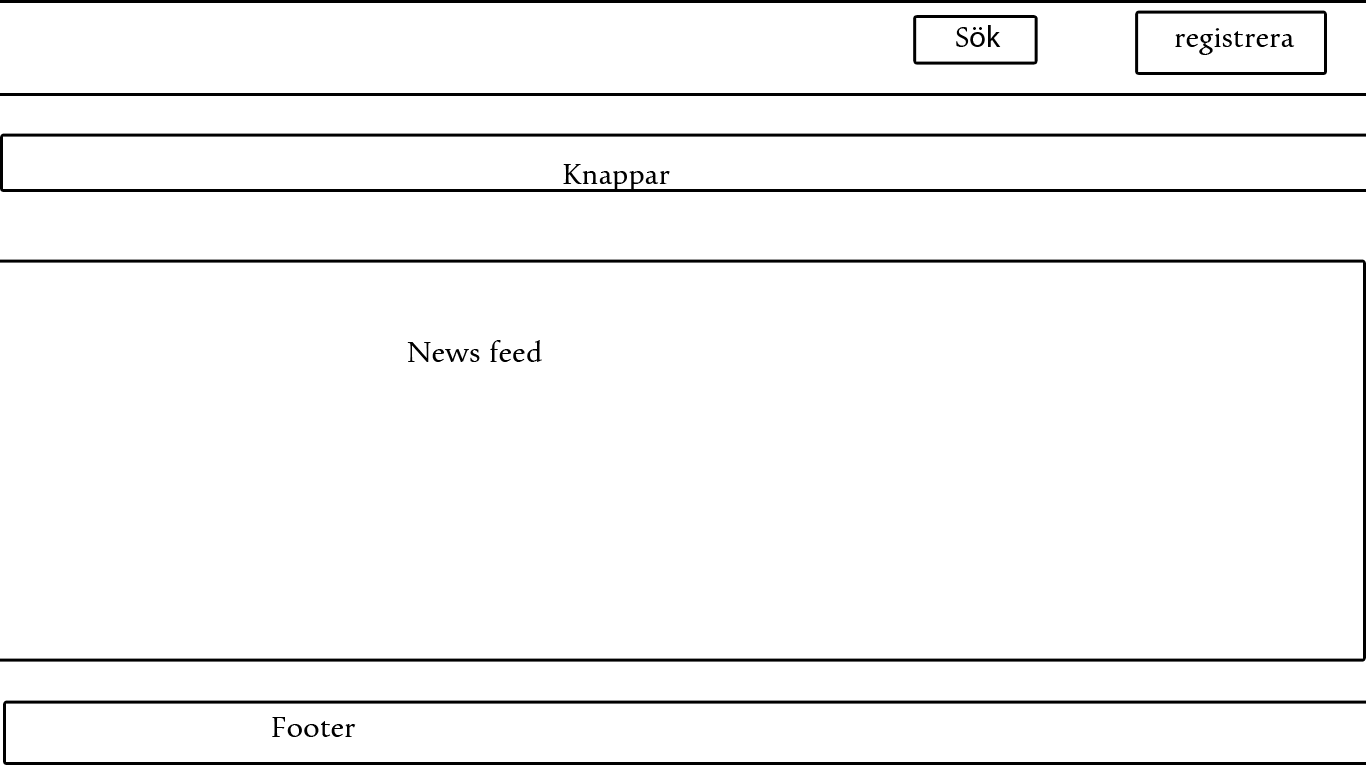
<style>
.page{position:relative;width:1366px;height:768px;background:#ffffff}
.page>*{position:absolute;margin:0}
.t1{font:30px "MyriadPro-Regular";color:#000000}
.t2{font:30px "Pescadero";color:#000000}
</style>
<div class="page">
<p class="t1" style="left:956px;top:25px;width:45px;height:22px"><span class="t2">S</span>ök</p>
<p class="t2" style="left:1175px;top:28px;width:120px;height:27px">registrera</p>
<p class="t2" style="left:563px;top:164px;width:107px;height:28px">Knappar</p>
<p class="t2" style="left:407px;top:340px;width:135px;height:22px">News feed</p>
<p class="t2" style="left:272px;top:717px;width:84px;height:20px">Footer</p>
</div>
